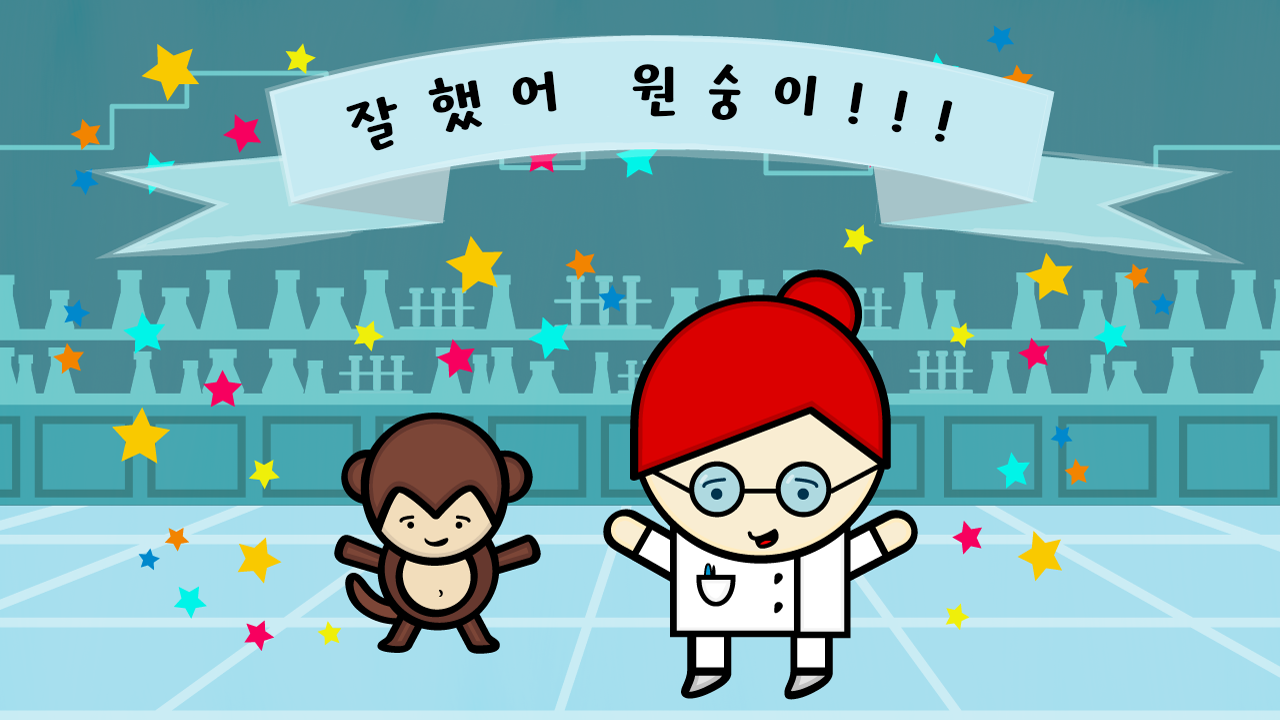
<style>
.page{position:relative;width:1280px;height:720px}
.page>*{position:absolute;margin:0}
.t1{font:62px "KOTRAHOPE";letter-spacing:0.46em;color:#000000}
</style>
<div class="page">
<p class="t1" style="left:346px;top:64px;width:607px;height:87px">잘했어 원숭이!!!</p>
</div>
